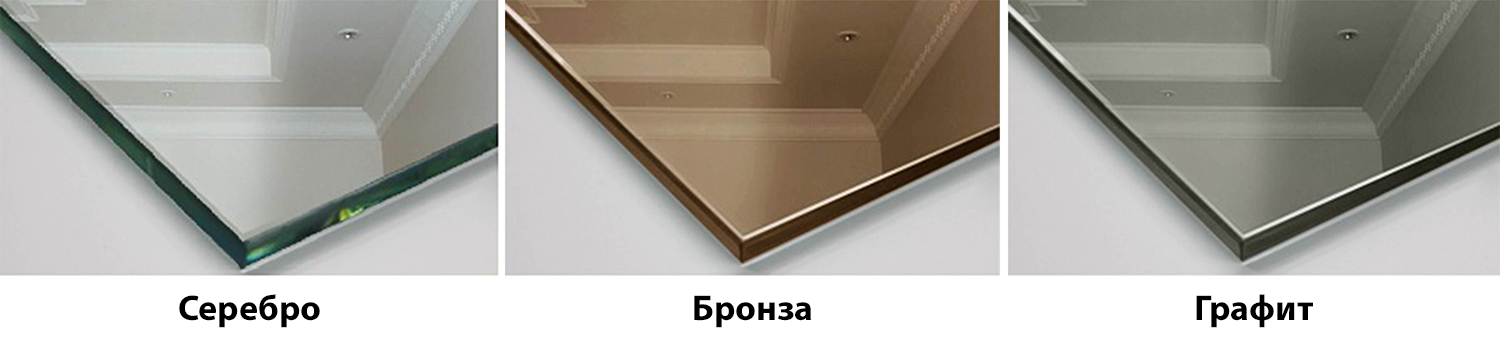
<style>
.page{position:relative;width:1500px;height:339px}
.page>*{position:absolute;margin:0}
.t1{font:36px "MyriadPro-Bold";color:#000000}
</style>
<div class="page">
<p class="t1" style="left:179px;top:294px;width:141px;height:34px">Серебро</p>
<p class="t1" style="left:1196px;top:294px;width:117px;height:34px">Графит</p>
<p class="t1" style="left:694px;top:295px;width:117px;height:33px">Бронза</p>
</div>
